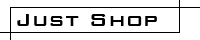
<style>
.page{position:relative;width:200px;height:40px;background:#ffffff}
.page>*{position:absolute;margin:0}
.t1{font:24px "BankGothicBT-Medium";letter-spacing:0.01em;color:#000000}
</style>
<div class="page">
<p class="t1" style="left:17px;top:14px;width:140px;height:12px">Just Shop</p>
</div>
